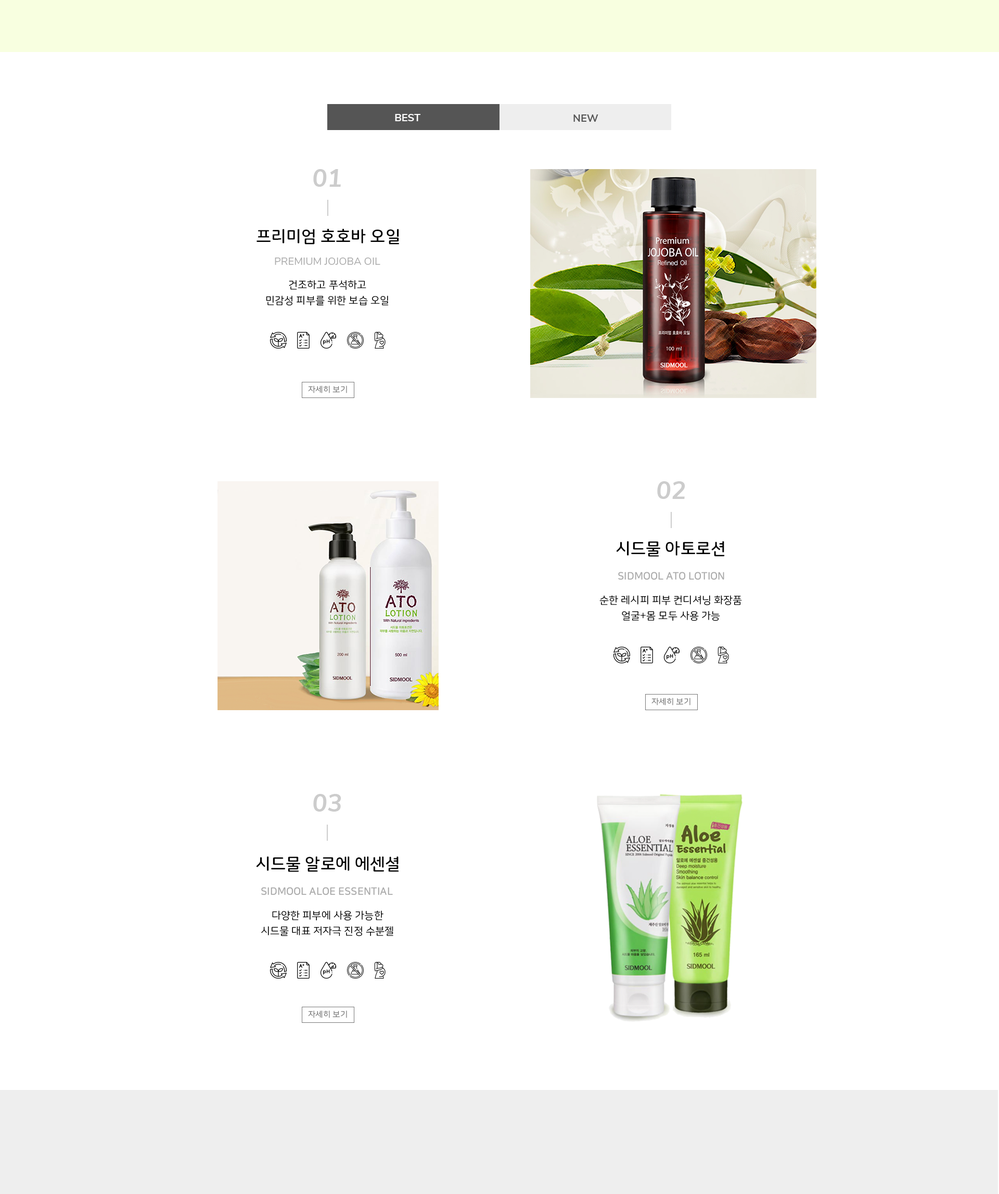
<style>
.page{position:relative;width:999px;height:1194px;background:#ffffff}
.page>*{position:absolute;margin:0}
.t1{font:10.4px "NunitoSans-Bold";color:#ffffff}
.t2{font:10.4px "NunitoSans-Bold";color:#555555}
.t3{font:25px "NunitoSans-BoldItalic";color:#cccccc}
.t4{font:16.6px "NanumSquareRoundOTFB";color:#000000}
.t5{font:10.4px "NunitoSans-Regular";color:#aaaaaa}
.t6{font:10.4px/15.6px "NanumSquareRoundOTFR";color:#000000}
.t7{font:8.3px "NanumSquareRoundOTFR";color:#777777}
.t8{font:10.4px "NanumSquareRoundOTFB";color:#aaaaaa}
</style>
<div class="page">
<p class="t1" style="left:395px;top:114px;width:25px;height:7px">BEST</p>
<p class="t2" style="left:573px;top:114px;width:25px;height:8px">NEW</p>
<p class="t3" style="left:313px;top:169px;width:28px;height:18px">01</p>
<p class="t4" style="left:256px;top:228px;width:143px;height:16px">프리미엄 호호바 오일</p>
<p class="t5" style="left:275px;top:258px;width:105px;height:7px">PREMIUM JOJOBA OIL</p>
<p class="t6" style="left:266px;top:280px;width:123px;height:26px;text-align:center">건조하고 푸석하고<br>민감성 피부를 위한 보습 오일</p>
<p class="t7" style="left:308px;top:385px;width:39px;height:8px">자세히 보기</p>
<p class="t3" style="left:657px;top:481px;width:28px;height:18px">02</p>
<p class="t4" style="left:616px;top:541px;width:109px;height:16px">시드물 아토로션</p>
<p class="t8" style="left:618px;top:572px;width:106px;height:8px">SIDMOOL ATO LOTION</p>
<p class="t6" style="left:599px;top:595px;width:143px;height:26px;text-align:center">순한 레시피 피부 컨디셔닝 화장품<br>얼굴+몸 모두 사용 가능</p>
<p class="t7" style="left:651px;top:698px;width:39px;height:7px">자세히 보기</p>
<p class="t3" style="left:313px;top:794px;width:28px;height:18px">03</p>
<p class="t4" style="left:256px;top:856px;width:143px;height:16px">시드물 알로에 에센셜</p>
<p class="t8" style="left:261px;top:887px;width:132px;height:8px">SIDMOOL ALOE ESSENTIAL</p>
<p class="t6" style="left:261px;top:910px;width:132px;height:26px;text-align:center">다양한 피부에 사용 가능한<br>시드물 대표 저자극 진정 수분젤</p>
<p class="t7" style="left:308px;top:1010px;width:39px;height:8px">자세히 보기</p>
</div>
